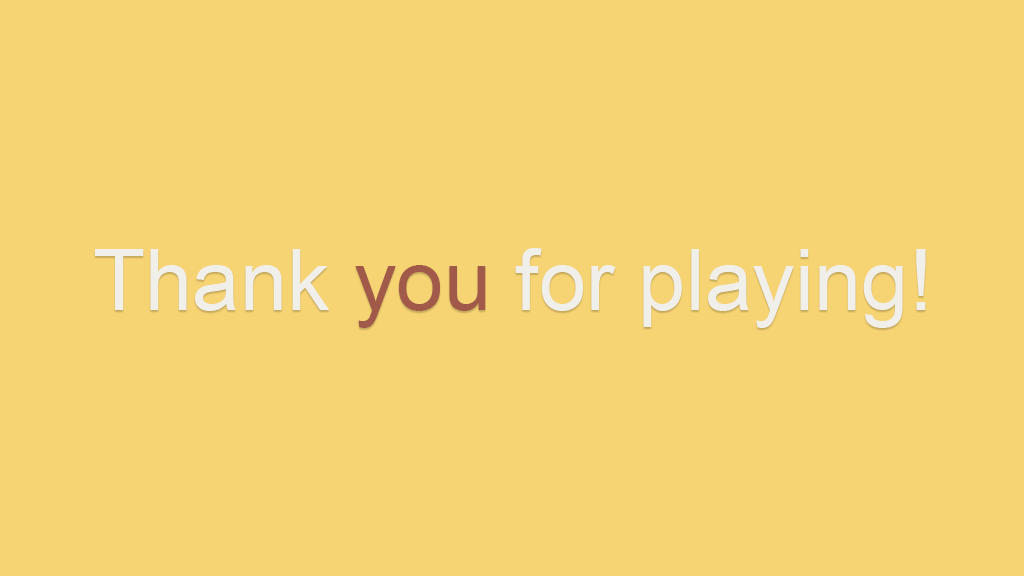
<style>
.page{position:relative;width:1024px;height:576px;background:#f7d473}
.page>*{position:absolute;margin:0}
.t1{font:85.3px "ArialMT";color:#f1efea}
.t2{font:85.3px "ArialMT";color:#a15949}
</style>
<div class="page">
<p class="t1" style="left:95px;top:248px;width:831px;height:80px">Thank <span class="t2">you</span> for playing!</p>
</div>
